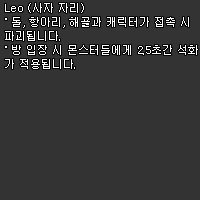
<style>
.page{position:relative;width:200px;height:200px;background:#333333}
.page>*{position:absolute;margin:0}
.t1{font:11px/14px "Dotum";color:#ffffff}
</style>
<div class="page">
<p class="t1" style="left:5px;top:3px;width:193px;height:66px">Leo (사자 자리)<br>˚ 돌, 항아리, 해골과 캐릭터가 접촉 시<br>파괴됩니다.<br>˚ 방 입장 시 몬스터들에게 2.5초간 석화<br>가 적용됩니다.</p>
</div>
